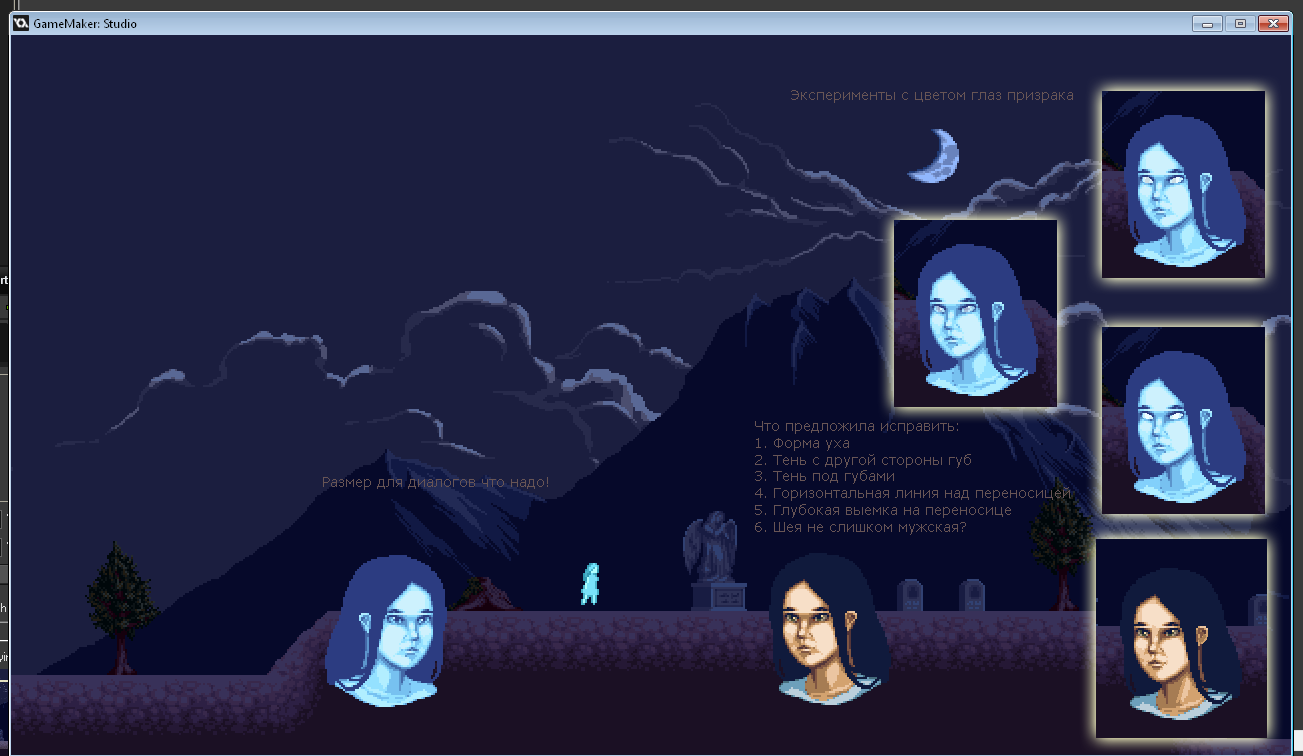
<style>
.page{position:relative;width:1303px;height:756px;background:#1b1e3f}
.page>*{position:absolute;margin:0}
.t1{font:14px "Verdana";color:#685555}
</style>
<div class="page">
<p class="t1" style="left:791px;top:90px;width:282px;height:13px">Эксперименты с цветом глаз призрака</p>
<p class="t1" style="left:755px;top:421px;width:315px;height:114px">Что предложила исправить:<br>1. Форма уха<br>2. Тень с другой стороны губ<br>3. Тень под губами<br>4. Горизонтальная линия над переносицей<br>5. Глубокая выемка на переносице<br>6. Шея не слишком мужская?</p>
<p class="t1" style="left:323px;top:477px;width:225px;height:13px">Размер для диалогов что надо!</p>
</div>
